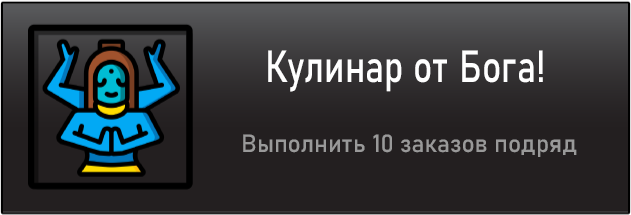
<style>
.page{position:relative;width:631px;height:215px;background:#231f20}
.page>*{position:absolute;margin:0}
.t1{font:44.4px "Bahnschrift";color:#ffffff;scale:0.81 1}
.t2{font:24.6px "Bahnschrift";color:#999999}
</style>
<div class="page">
<p class="t1" style="left:268px;top:50px;width:275px;height:42px">Кулинар от Бога!</p>
<p class="t2" style="left:243px;top:134px;width:334px;height:23px">Выполнить 10 заказов подряд</p>
</div>
